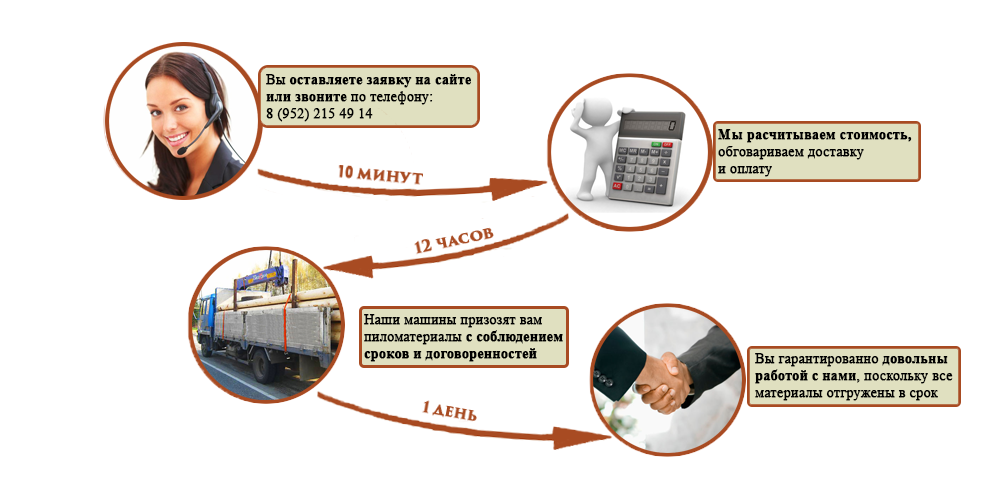
<style>
.page{position:relative;width:1000px;height:500px;background:#ffffff}
.page>*{position:absolute;margin:0}
.t1{font:14px "TimesNewRomanPS-BoldMT";color:#000000;font-weight:bold}
.t2{font:14px "TimesNewRomanPSMT";color:#000000;font-weight:bold}
</style>
<div class="page">
<p class="t1" style="left:266px;top:74px;width:205px;height:48px"><span class="t2">Вы </span>оставляете заявку на сайте<br>или звоните<span class="t2"> по телефону:<br>8 (952) 215 49 14</span></p>
<p class="t2" style="left:718px;top:129px;width:194px;height:48px"><span class="t1">Мы расчитываем стоимость,<br></span>обговариваем доставку<br>и оплату</p>
<p class="t2" style="left:364px;top:314px;width:199px;height:48px">Наши машины призозят вам <br>пиломатериалы <span class="t1">с соблюдением <br>сроков и договоренностей</span></p>
<p class="t2" style="left:755px;top:353px;width:198px;height:48px">Вы гарантированно <span class="t1">довольны<br>работой с нами</span>, поскольку все<br>материалы отгружены в срок</p>
</div>
